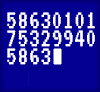
<style>
.page{position:relative;width:100px;height:92px;background:#030092}
.page>*{position:absolute;margin:0}
.t1{font:27px/18px "VT323-Regular";letter-spacing:0.005em;color:#ffffff}
</style>
<div class="page">
<p class="t1" style="left:7px;top:12px;width:88px;height:53px">58630101<br>75329940<br>5863</p>
</div>
